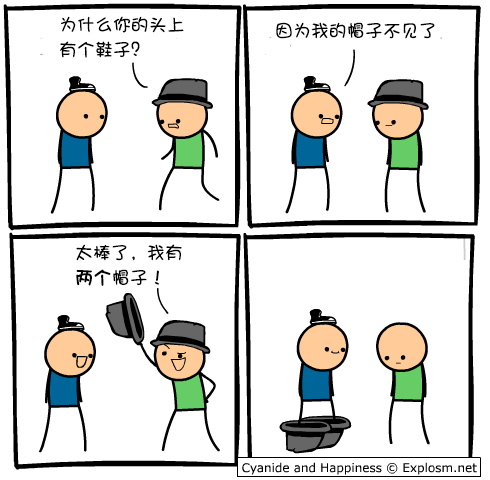
<style>
.page{position:relative;width:490px;height:480px;background:#ffffff}
.page>*{position:absolute;margin:0}
.t1{font:18px/25px "DFPShaoNvW5";color:#000000}
.t2{font:18px "DFPShaoNvW5";color:#000000}
.t3{font:18px/25px "DFPShaoNvW5";color:#000000;font-weight:bold}
</style>
<div class="page">
<p class="t1" style="left:60px;top:16px;width:124px;height:42px">为什么你的头上<br>有个鞋子？</p>
<p class="t2" style="left:276px;top:22px;width:159px;height:17px">因为我的帽子不见了</p>
<p class="t1" style="left:76px;top:244px;width:106px;height:42px">太棒了，我有<br><span class="t3">两个</span>帽子！</p>
</div>
